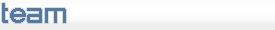
<style>
.page{position:relative;width:275px;height:30px}
.page>*{position:absolute;margin:0}
.t1{font:26px "Zeroes";color:#517ba3}
</style>
<div class="page">
<p class="t1" style="left:2px;top:3px;width:64px;height:20px">team</p>
</div>
